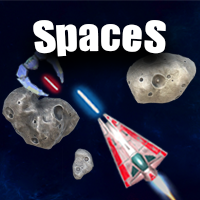
<style>
.page{position:relative;width:200px;height:200px}
.page>*{position:absolute;margin:0}
.t1{font:41.7px "Impact";color:#ffffff}
</style>
<div class="page">
<p class="t1" style="left:33px;top:20px;width:133px;height:37px">SpaceS</p>
</div>
